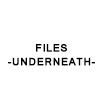
<style>
.page{position:relative;width:103px;height:103px;background:#ffffff}
.page>*{position:absolute;margin:0}
.t1{font:10px/12px "Mangal-Bold";letter-spacing:0.03em;color:#000000;text-transform:uppercase;font-weight:bold}
</style>
<div class="page">
<p class="t1" style="left:8px;top:44px;width:87px;height:22px;text-align:center">files<br>-underneath-</p>
</div>
